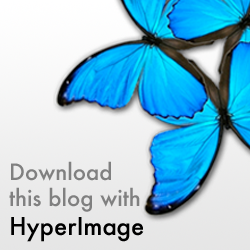
<style>
.page{position:relative;width:250px;height:250px}
.page>*{position:absolute;margin:0}
.t1{font:22px "Futura-Medium";color:#808080}
.t2{font:24px "Futura-Medium";color:#000000}
</style>
<div class="page">
<p class="t1" style="left:9px;top:161px;width:135px;height:81px">Download<br>this blog with<br><span class="t2">HyperImage</span></p>
</div>
